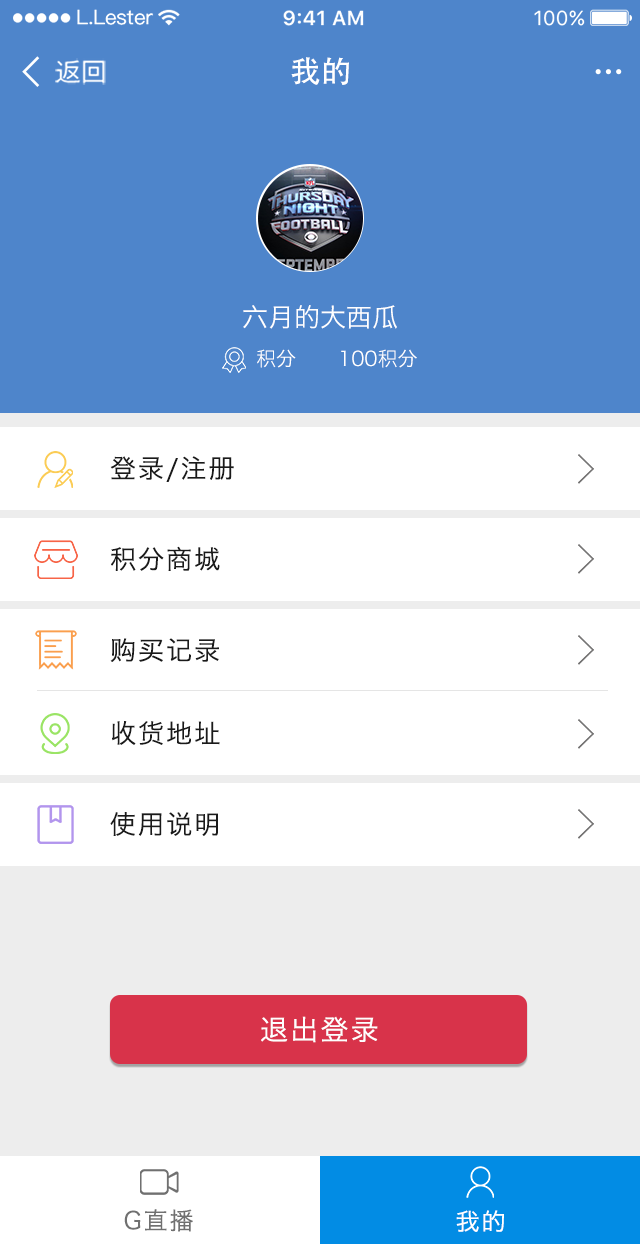
<style>
.page{position:relative;width:640px;height:1244px;background:#ffffff}
.page>*{position:absolute;margin:0}
.t1{font:25.6px "SourceHanSansCN-Regular";color:#ffffff}
.t2{font:30.7px "AdobeHeitiStd-Regular";color:#ffffff}
.t3{font:26px "HiraginoSansGB-W3";color:#ffffff}
.t4{font:20px "HiraginoSansGB-W3";color:#ffffff}
.t5{font:26px "HiraginoSansGB-W3";letter-spacing:0.08em;color:#1a1a1a}
.t6{font:28px "HiraginoSansGB-W3";letter-spacing:0.08em;color:#fefefe}
.t7{font:24px "HiraginoSansGB-W3";letter-spacing:0.08em;color:#707070}
.t8{font:24px "HiraginoSansGB-W3";letter-spacing:0.08em;color:#ffffff}
</style>
<div class="page">
<p class="t1" style="left:55px;top:58px;width:51px;height:27px">返回</p>
<p class="t2" style="left:291px;top:57px;width:58px;height:28px">我的</p>
<p class="t3" style="left:243px;top:305px;width:154px;height:24px">六月的大西瓜</p>
<p class="t4" style="left:257px;top:349px;width:39px;height:19px">积分</p>
<p class="t4" style="left:341px;top:349px;width:76px;height:19px">100积分</p>
<p class="t5" style="left:110px;top:456px;width:124px;height:26px">登录/注册</p>
<p class="t5" style="left:111px;top:546px;width:109px;height:25px">积分商城</p>
<p class="t5" style="left:110px;top:638px;width:109px;height:24px">购买记录</p>
<p class="t5" style="left:112px;top:721px;width:108px;height:24px">收货地址</p>
<p class="t5" style="left:110px;top:812px;width:108px;height:24px">使用说明</p>
<p class="t6" style="left:261px;top:1016px;width:117px;height:27px">退出登录</p>
<p class="t7" style="left:124px;top:1209px;width:69px;height:23px">G直播</p>
<p class="t8" style="left:456px;top:1210px;width:48px;height:22px">我的</p>
</div>
